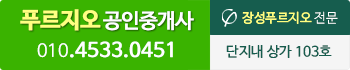
<style>
.page{position:relative;width:350px;height:70px;background:#3ab300}
.page>*{position:absolute;margin:0}
.t1{font:20.2px "NanumBarunGothicOTF";letter-spacing:-0.025em;color:#ffffff;font-weight:bold}
.t2{font:22.5px "NanumBarunGothicOTFBold";letter-spacing:-0.025em;color:#ffff81;font-weight:bold}
.t3{font:13px "NanumBarunGothicOTF";color:#ffff80}
.t4{font:13px "NanumBarunGothicOTFUltraLight";color:#ffffff}
.t5{font:19.5px "NanumBarunGothicOTF";color:#ffffff;font-weight:bold}
.t6{font:17.4px "NanumBarunGothicOTFUltraLight";color:#ffffff;font-weight:bold}
.t7{font:14px "NanumBarunGothicOTF";color:#165d4e}
</style>
<div class="page">
<p class="t1" style="left:20px;top:9px;width:174px;height:22px"><span class="t2">푸르지오 </span>공인중개사</p>
<p class="t3" style="left:242px;top:11px;width:96px;height:13px">장성푸르지오 <span class="t4">전문</span></p>
<p class="t5" style="left:37px;top:41px;width:136px;height:17px"><span class="t6">010</span>.4533.0451</p>
<p class="t7" style="left:226px;top:45px;width:106px;height:13px">단지내 상가 103호</p>
</div>
